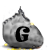
<style>
.page{position:relative;width:50px;height:50px;background:#ffffff}
.page>*{position:absolute;margin:0}
.t1{font:18px "Ravie";color:#010101}
</style>
<div class="page">
<p class="t1" style="left:15px;top:26px;width:15px;height:16px">G</p>
</div>
